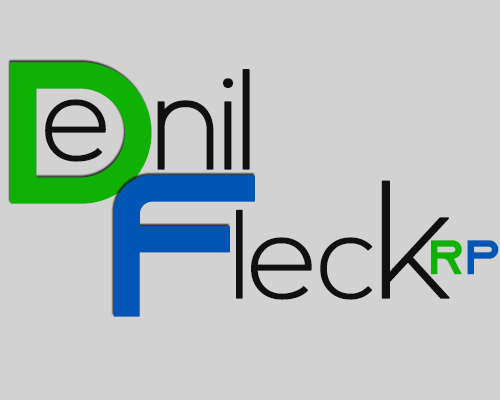
<style>
.page{position:relative;width:500px;height:400px;background:#d2d2d2}
.page>*{position:absolute;margin:0}
.t1{font:200px "AzonixRegular";color:#0fb103;font-weight:bold}
.t2{font:170px "Asenine";color:#101010;font-weight:bold}
.t3{font:150px "Asenine";color:#101010;font-weight:bold}
.t4{font:200px "AzonixRegular";color:#0055b5;font-weight:bold}
.t5{font:200px "Asenine";color:#101010;font-weight:bold}
.t6{font:48px "AzonixRegular";color:#0fb103;font-weight:bold}
.t7{font:48px "AzonixRegular";color:#0055b5;font-weight:bold}
</style>
<div class="page">
<p class="t1" style="left:10px;top:62px;width:142px;height:142px">D</p>
<p class="t2" style="left:157px;top:69px;width:93px;height:101px">nil</p>
<p class="t3" style="left:45px;top:99px;width:61px;height:63px">e</p>
<p class="t4" style="left:113px;top:175px;width:142px;height:142px">F</p>
<p class="t3" style="left:236px;top:180px;width:214px;height:120px">lec<span class="t5">k</span></p>
<p class="t6" style="left:431px;top:240px;width:68px;height:35px">R<span class="t7">P</span></p>
</div>
